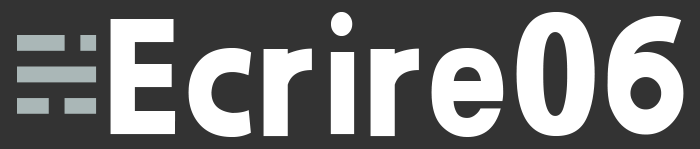
<style>
.page{position:relative;width:700px;height:149px;background:#333333}
.page>*{position:absolute;margin:0}
.t1{font:150px "KOTRA_BOLD-Bold";color:#ffffff;scale:0.9 1}
</style>
<div class="page">
<p class="t1" style="left:110px;top:12px;width:574px;height:125px">Ecrire06</p>
</div>
